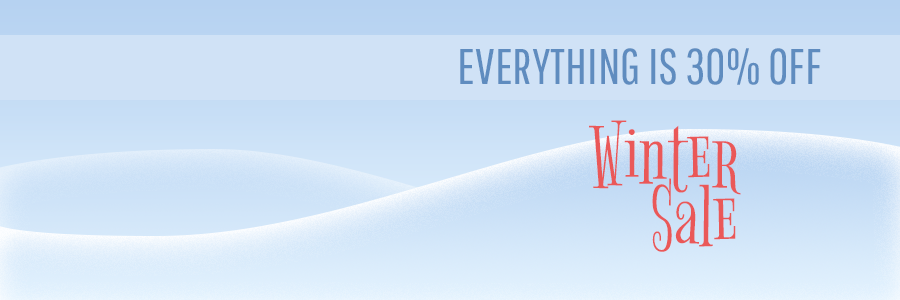
<style>
.page{position:relative;width:900px;height:300px}
.page>*{position:absolute;margin:0}
.t1{font:50px "PathwayGothicOne-Book";color:#5f8cbf;text-transform:uppercase}
.t2{font:93px "BigelowRules-Regular";color:#ea5858}
</style>
<div class="page">
<p class="t1" style="left:460px;top:48px;width:361px;height:37px">everything is 30% off</p>
<p class="t2" style="left:589px;top:120px;width:152px;height:75px">Winter</p>
<p class="t2" style="left:652px;top:178px;width:84px;height:74px">Sale</p>
</div>
